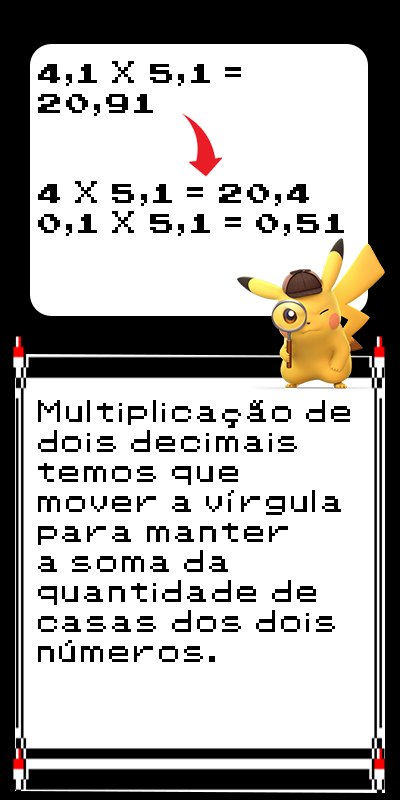
<style>
.page{position:relative;width:400px;height:800px;background:#ffffff}
.page>*{position:absolute;margin:0}
.t1{font:25px "Pokemon-Classic";color:#000000}
</style>
<div class="page">
<p class="t1" style="left:38px;top:61px;width:306px;height:175px">4,1 X 5,1 = 20,91<br><br><br>4 X 5,1 = 20,4<br>0,1 X 5,1 = 0,51</p>
<p class="t1" style="left:38px;top:400px;width:312px;height:262px">Multiplicação de<br>dois decimais <br>temos que<br>mover a vírgula<br>para manter<br>a soma da <br>quantidade de<br>casas dos dois<br>números.</p>
</div>
